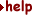
<style>
.page{position:relative;width:32px;height:15px;background:#ffffff}
.page>*{position:absolute;margin:0}
.t1{font:14px "ComicSansMS-Bold";color:#840000}
</style>
<div class="page">
<p class="t1" style="left:6px;top:0px;width:26px;height:15px">help</p>
</div>
